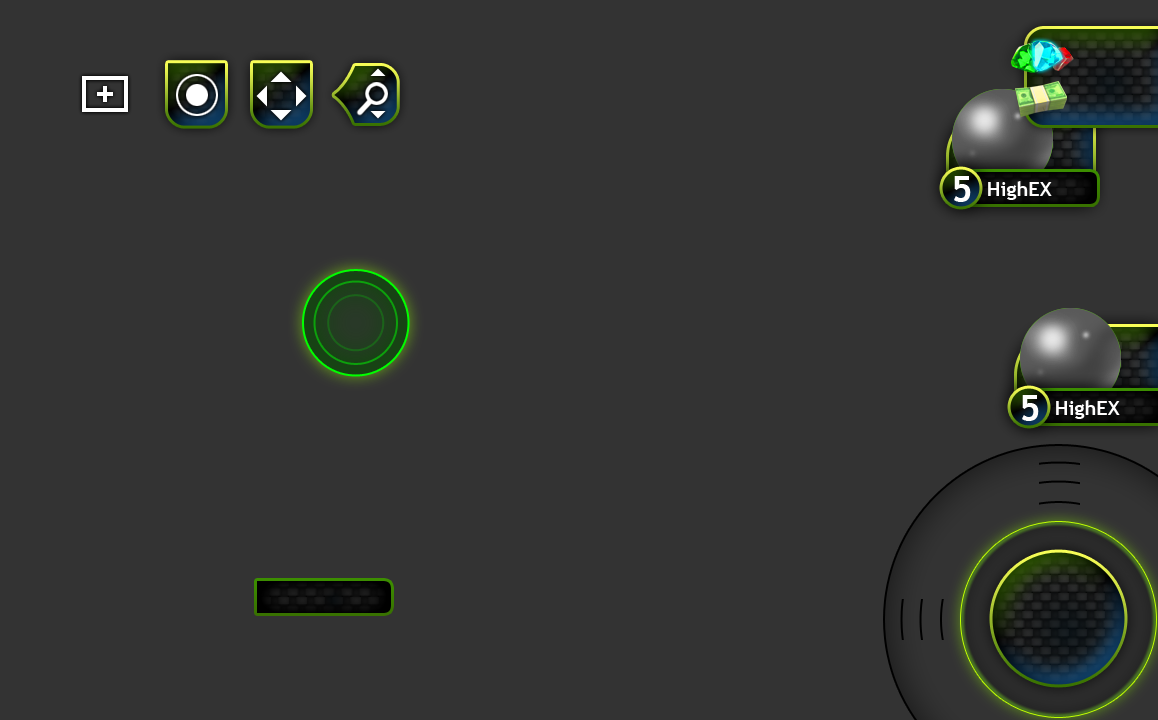
<style>
.page{position:relative;width:1158px;height:720px;background:#333333}
.page>*{position:absolute;margin:0}
.t1{font:37.2px "TrebuchetMS-Bold";color:#fffefe}
.t2{font:20px "TrebuchetMS-Bold";color:#fffefe}
</style>
<div class="page">
<p class="t1" style="left:954px;top:176px;width:17px;height:26px">5</p>
<p class="t2" style="left:988px;top:181px;width:64px;height:19px">HighEX</p>
<p class="t1" style="left:1022px;top:395px;width:17px;height:26px">5</p>
<p class="t2" style="left:1056px;top:400px;width:64px;height:19px">HighEX</p>
</div>
